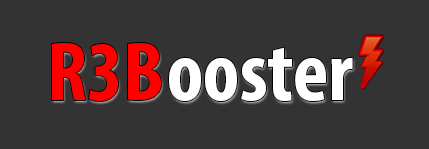
<style>
.page{position:relative;width:429px;height:149px;background:#333333}
.page>*{position:absolute;margin:0}
.t1{font:84.7px "MyriadPro-BoldCond";color:#ff0000}
.t2{font:84.7px "MyriadPro-BoldCond";color:#ffffff}
</style>
<div class="page">
<p class="t1" style="left:52px;top:43px;width:109px;height:58px">R3B</p>
<p class="t2" style="left:169px;top:47px;width:184px;height:54px">ooster</p>
</div>
